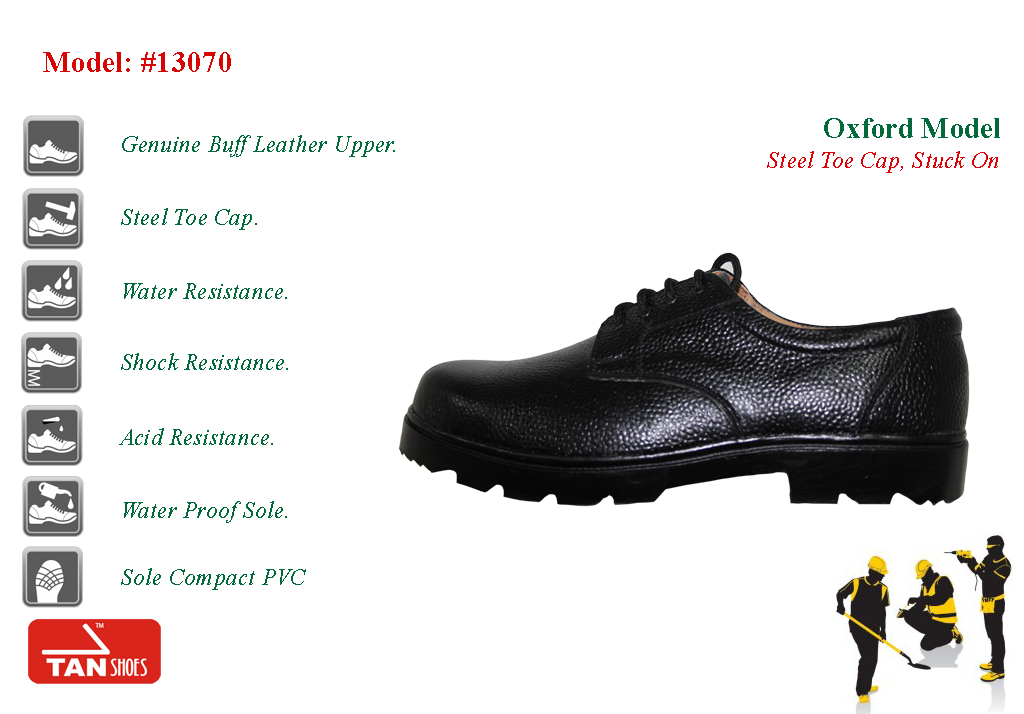
<style>
.page{position:relative;width:1024px;height:714px;background:#ffffff}
.page>*{position:absolute;margin:0}
.t1{font:30px "TimesNewRomanPS-BoldMT";letter-spacing:0.01em;color:#d80505;scale:0.95 1}
.t2{font:30px "TimesNewRomanPS-BoldMT";letter-spacing:0.01em;color:#026a3a;scale:0.95 1}
.t3{font:24px "TimesNewRomanPS-ItalicMT";letter-spacing:0.01em;color:#026a3a;scale:0.95 1}
.t4{font:24px "TimesNewRomanPS-ItalicMT";letter-spacing:0.01em;color:#dc0207;scale:0.95 1}
</style>
<div class="page">
<p class="t1" style="left:43px;top:52px;width:188px;height:20px">Model: #13070</p>
<p class="t2" style="left:824px;top:118px;width:176px;height:20px">Oxford Model</p>
<p class="t3" style="left:122px;top:135px;width:273px;height:22px">Genuine Buff Leather Upper.</p>
<p class="t4" style="left:767px;top:151px;width:231px;height:22px">Steel Toe Cap, Stuck On</p>
<p class="t3" style="left:121px;top:208px;width:136px;height:22px">Steel Toe Cap.</p>
<p class="t3" style="left:124px;top:283px;width:163px;height:16px">Water Resistance.</p>
<p class="t3" style="left:121px;top:353px;width:167px;height:17px">Shock Resistance.</p>
<p class="t3" style="left:119px;top:428px;width:154px;height:17px">Acid Resistance.</p>
<p class="t3" style="left:124px;top:501px;width:163px;height:22px">Water Proof Sole.</p>
<p class="t3" style="left:121px;top:568px;width:185px;height:22px">Sole Compact PVC</p>
</div>
